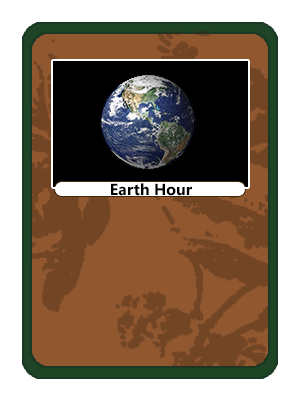
<style>
.page{position:relative;width:300px;height:400px;background:#ffffff}
.page>*{position:absolute;margin:0}
.t1{font:16px "SegoeUI-Bold";color:#000000}
</style>
<div class="page">
<p class="t1" style="left:111px;top:183px;width:81px;height:13px">Earth Hour</p>
</div>
